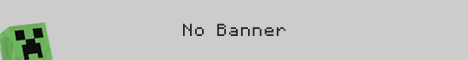
<style>
.page{position:relative;width:468px;height:60px;background:#cccccc}
.page>*{position:absolute;margin:0}
.t1{font:14px "Minecraftia";letter-spacing:0.1em;color:#292929}
</style>
<div class="page">
<p class="t1" style="left:183px;top:23px;width:103px;height:13px">No Banner</p>
</div>
